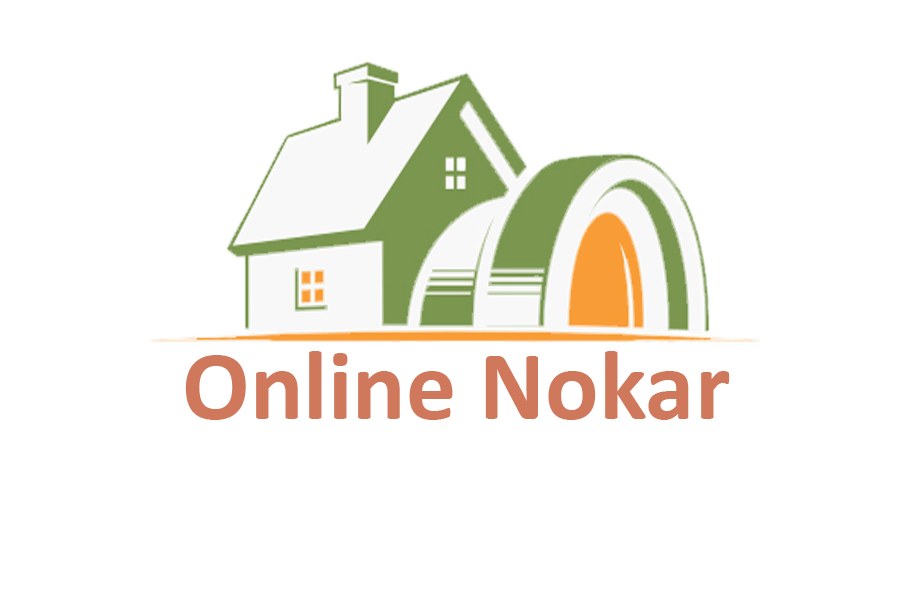
<style>
.page{position:relative;width:900px;height:600px;background:#ffffff}
.page>*{position:absolute;margin:0}
.t1{font:100px "Calibri-Bold";color:#cf785c}
</style>
<div class="page">
<p class="t1" style="left:185px;top:351px;width:545px;height:69px">Online Nokar</p>
</div>
